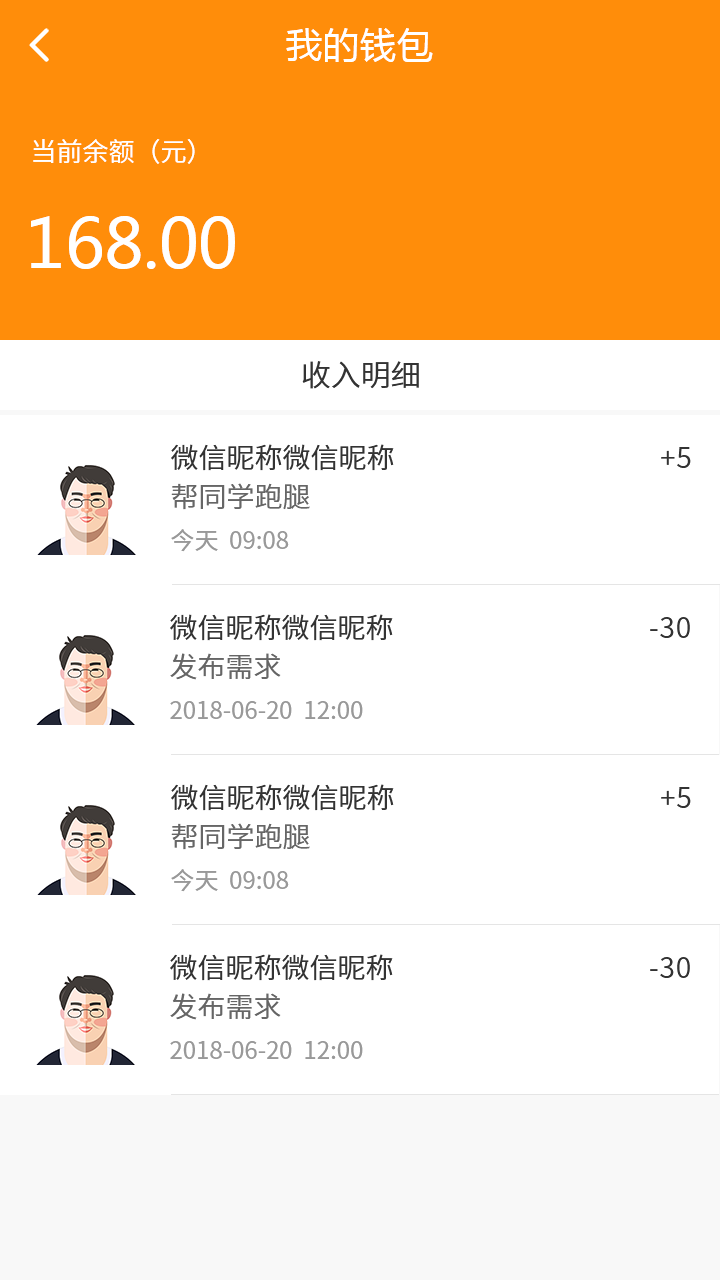
<style>
.page{position:relative;width:720px;height:1280px;background:#ffffff}
.page>*{position:absolute;margin:0}
.t1{font:36px "MicrosoftYaHei";letter-spacing:0.03em;color:#ffffff}
.t2{font:26px "NotoSansCJKsc-DemiLight";color:#ffffff;font-variant:small-caps}
.t3{font:68px "MicrosoftYaHei";color:#ffffff;font-variant:small-caps}
.t4{font:30px "NotoSansCJKsc-DemiLight";color:#333333;font-variant:small-caps}
.t5{font:28px "NotoSansCJKsc-DemiLight";color:#333333;font-variant:small-caps}
.t6{font:28px "NotoSansCJKsc-DemiLight";letter-spacing:0.03em;color:#333333;font-variant:small-caps}
.t7{font:28px "NotoSansCJKsc-DemiLight";color:#666666;font-variant:small-caps}
.t8{font:24px "NotoSansCJKsc-Regular";color:#999999;font-variant:small-caps}
</style>
<div class="page">
<p class="t1" style="left:286px;top:28px;width:147px;height:34px">我的钱包</p>
<p class="t2" style="left:33px;top:139px;width:162px;height:25px">当前余额（元）</p>
<p class="t3" style="left:31px;top:216px;width:204px;height:53px">168.00</p>
<p class="t4" style="left:302px;top:361px;width:117px;height:28px">收入明细</p>
<p class="t5" style="left:171px;top:444px;width:223px;height:27px">微信昵称微信昵称</p>
<p class="t6" style="left:661px;top:447px;width:30px;height:21px">+5</p>
<p class="t7" style="left:171px;top:483px;width:139px;height:27px">帮同学跑腿</p>
<p class="t8" style="left:171px;top:529px;width:118px;height:23px">今天  09:08</p>
<p class="t5" style="left:170px;top:614px;width:223px;height:27px">微信昵称微信昵称</p>
<p class="t6" style="left:650px;top:617px;width:40px;height:21px">-30</p>
<p class="t7" style="left:170px;top:653px;width:111px;height:27px">发布需求</p>
<p class="t8" style="left:170px;top:701px;width:193px;height:18px">2018-06-20  12:00</p>
<p class="t5" style="left:171px;top:784px;width:223px;height:27px">微信昵称微信昵称</p>
<p class="t6" style="left:661px;top:787px;width:30px;height:21px">+5</p>
<p class="t7" style="left:171px;top:823px;width:139px;height:27px">帮同学跑腿</p>
<p class="t8" style="left:171px;top:869px;width:118px;height:23px">今天  09:08</p>
<p class="t5" style="left:170px;top:954px;width:223px;height:27px">微信昵称微信昵称</p>
<p class="t6" style="left:650px;top:957px;width:40px;height:21px">-30</p>
<p class="t7" style="left:170px;top:993px;width:111px;height:27px">发布需求</p>
<p class="t8" style="left:170px;top:1041px;width:193px;height:18px">2018-06-20  12:00</p>
</div>
